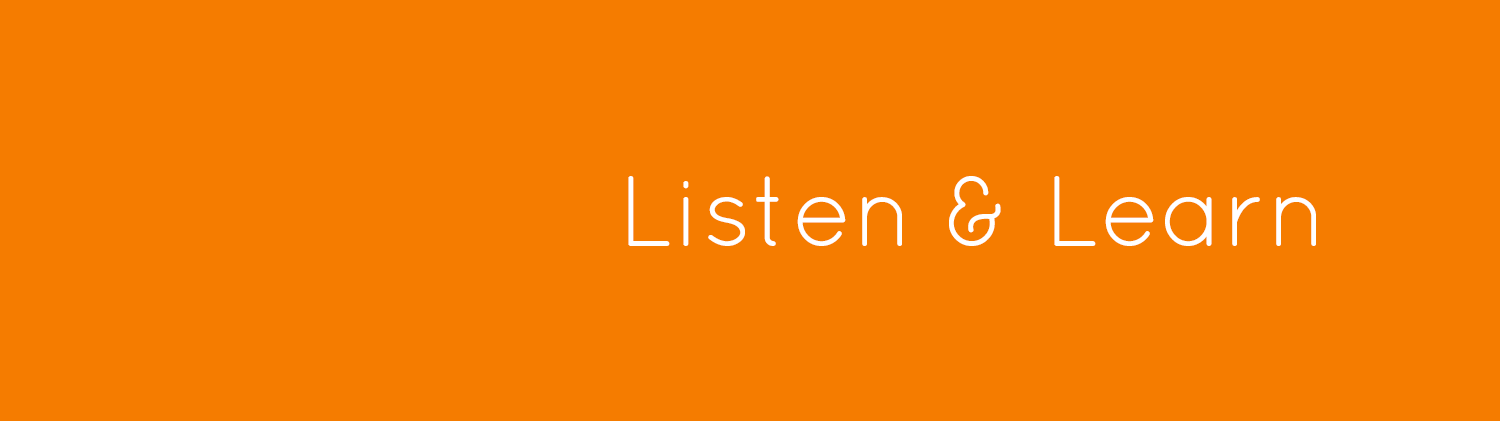
<style>
.page{position:relative;width:1500px;height:421px;background:#f57c00}
.page>*{position:absolute;margin:0}
.t1{font:100px "Quicksand-Regular";color:#ffffff}
</style>
<div class="page">
<p class="t1" style="left:628px;top:176px;width:688px;height:70px">Listen &amp; Learn</p>
</div>
